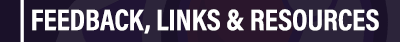
<style>
.page{position:relative;width:400px;height:42px;background:#2c243a}
.page>*{position:absolute;margin:0}
.t1{font:30px "AcuminProCond-Bold";color:#ffffff;text-transform:uppercase}
</style>
<div class="page">
<p class="t1" style="left:32px;top:9px;width:347px;height:25px">Feedback, Links &amp; Resources</p>
</div>
